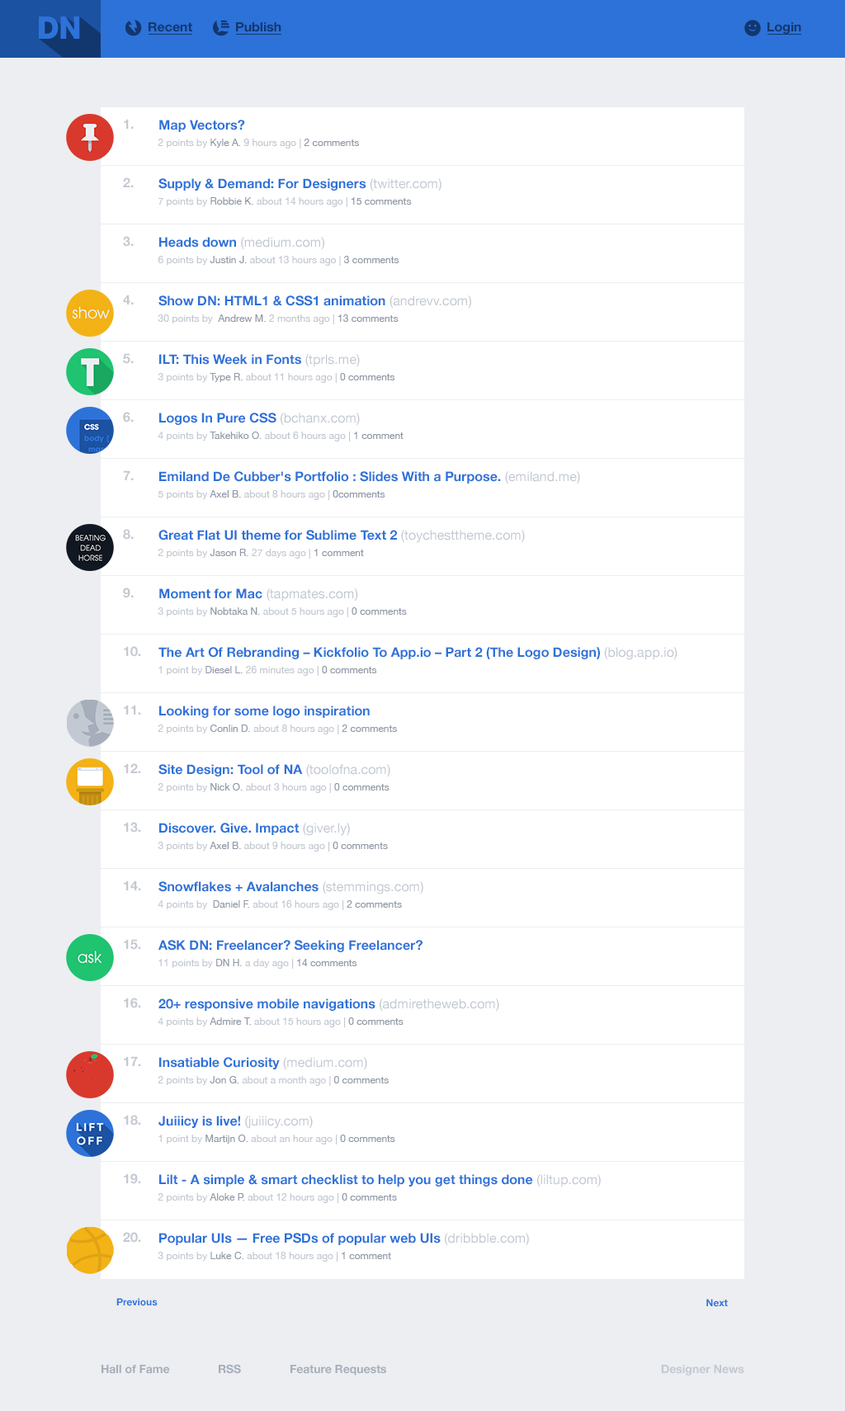
<style>
.page{position:relative;width:845px;height:1411px;background:#ffffff}
.page>*{position:absolute;margin:0}
.t1{font:12.9px "HelveticaNeue-Bold";color:#12376f}
.t2{font:13.2px "HelveticaNeue-Bold";color:#c3c9d2}
.t3{font:13.2px "HelveticaNeue-Bold";color:#2d72d9}
.t4{font:9.9px "HelveticaNeue";color:#c3c9d2}
.t5{font:9.9px "HelveticaNeue";color:#9099a7}
.t6{font:13.2px "HelveticaNeue";color:#c3c9d2}
.t7{font:9.9px "HelveticaNeue-Bold";color:#2d72d9}
.t8{font:11.6px "HelveticaNeue-Bold";color:#a6aebb}
.t9{font:11.6px "HelveticaNeue-Bold";color:#c3c9d2}
</style>
<div class="page">
<p class="t1" style="left:149px;top:22px;width:43px;height:10px">Recent</p>
<p class="t1" style="left:236px;top:22px;width:45px;height:10px">Publish</p>
<p class="t1" style="left:767px;top:22px;width:34px;height:12px">Login</p>
<p class="t2" style="left:124px;top:119px;width:10px;height:10px">1.</p>
<p class="t3" style="left:159px;top:120px;width:86px;height:12px">Map Vectors?</p>
<p class="t4" style="left:158px;top:139px;width:201px;height:10px">2 points by <span class="t5">Kyle A.</span> 9 hours ago | <span class="t5">2 comments</span></p>
<p class="t2" style="left:123px;top:177px;width:11px;height:10px">2.</p>
<p class="t3" style="left:158px;top:178px;width:283px;height:13px">Supply &amp; Demand: For Designers<span class="t6"> (twitter.com)</span></p>
<p class="t4" style="left:158px;top:197px;width:254px;height:10px">7 points by<span class="t5"> Robbie K.</span> about 14 hours ago | <span class="t5">15 comments</span></p>
<p class="t2" style="left:123px;top:236px;width:11px;height:11px">3.</p>
<p class="t6" style="left:159px;top:237px;width:165px;height:13px"><span class="t3">Heads down </span>(medium.com)</p>
<p class="t4" style="left:158px;top:256px;width:241px;height:10px">6 points by<span class="t5"> Justin J. </span>about 13 hours ago | <span class="t5">3 comments</span></p>
<p class="t2" style="left:123px;top:295px;width:11px;height:10px">4.</p>
<p class="t3" style="left:158px;top:295px;width:313px;height:14px">Show DN: HTML1 &amp; CSS1 animation <span class="t6">(andrevv.com)</span></p>
<p class="t4" style="left:158px;top:314px;width:241px;height:10px">30 points by<span class="t5">  Andrew M.</span> 2 months ago | <span class="t5">13 comments</span></p>
<p class="t2" style="left:123px;top:353px;width:11px;height:11px">5.</p>
<p class="t3" style="left:159px;top:354px;width:201px;height:13px">ILT: This Week in Fonts<span class="t6"> (tprls.me)</span></p>
<p class="t4" style="left:158px;top:373px;width:237px;height:10px">3 points by <span class="t5">Type R.</span> about 11 hours ago | <span class="t5">0 comments</span></p>
<p class="t2" style="left:123px;top:412px;width:11px;height:11px">6.</p>
<p class="t3" style="left:159px;top:413px;width:201px;height:13px">Logos In Pure CSS <span class="t6">(bchanx.com)</span></p>
<p class="t4" style="left:158px;top:432px;width:246px;height:9px">4 points by <span class="t5">Takehiko O.</span> about 6 hours ago | <span class="t5">1 comment</span></p>
<p class="t2" style="left:123px;top:470px;width:11px;height:10px">7.</p>
<p class="t3" style="left:159px;top:471px;width:421px;height:13px">Emiland De Cubber's Portfolio : Slides With a Purpose. <span class="t6">(emiland.me)</span></p>
<p class="t4" style="left:158px;top:490px;width:227px;height:10px">5 points by <span class="t5">Axel B.</span> about 8 hours ago | <span class="t5">0comments</span></p>
<p class="t2" style="left:123px;top:529px;width:11px;height:11px">8.</p>
<p class="t3" style="left:158px;top:530px;width:367px;height:13px">Great Flat UI theme for Sublime Text 2<span class="t6"> (toychesttheme.com)</span></p>
<p class="t4" style="left:158px;top:549px;width:206px;height:10px">2 points by<span class="t5"> Jason R.</span> 27 days ago | <span class="t5">1 comment</span></p>
<p class="t2" style="left:123px;top:588px;width:11px;height:10px">9.</p>
<p class="t3" style="left:159px;top:588px;width:199px;height:14px">Moment for Mac <span class="t6">(tapmates.com)</span></p>
<p class="t4" style="left:158px;top:607px;width:249px;height:10px">3 points by<span class="t5"> Nobtaka N.</span> about 5 hours ago | <span class="t5">0 comments</span></p>
<p class="t2" style="left:124px;top:646px;width:17px;height:11px">10.</p>
<p class="t3" style="left:158px;top:647px;width:520px;height:13px">The Art Of Rebranding – Kickfolio To App.io – Part 2 (The Logo Design) <span class="t6">(blog.app.io)</span></p>
<p class="t4" style="left:158px;top:666px;width:219px;height:10px">1 point by<span class="t5"> Diesel L.</span> 26 minutes ago | <span class="t5">0 comments</span></p>
<p class="t2" style="left:124px;top:705px;width:17px;height:10px">11.</p>
<p class="t3" style="left:159px;top:706px;width:211px;height:12px">Looking for some logo inspiration</p>
<p class="t4" style="left:158px;top:725px;width:239px;height:9px">2 points by <span class="t5">Conlin D.</span> about 8 hours ago | <span class="t5">2 comments</span></p>
<p class="t2" style="left:124px;top:763px;width:17px;height:10px">12.</p>
<p class="t3" style="left:158px;top:764px;width:232px;height:13px">Site Design: Tool of NA <span class="t6">(toolofna.com)</span></p>
<p class="t4" style="left:158px;top:783px;width:232px;height:10px">2 points by <span class="t5">Nick O.</span> about 3 hours ago | <span class="t5">0 comments</span></p>
<p class="t2" style="left:124px;top:822px;width:17px;height:11px">13.</p>
<p class="t3" style="left:159px;top:823px;width:191px;height:13px">Discover. Give. Impact <span class="t6">(giver.ly)</span></p>
<p class="t4" style="left:158px;top:842px;width:230px;height:10px">3 points by <span class="t5">Axel B. </span>about 9 hours ago | <span class="t5">0 comments</span></p>
<p class="t2" style="left:124px;top:881px;width:17px;height:9px">14.</p>
<p class="t3" style="left:158px;top:881px;width:265px;height:14px">Snowflakes + Avalanches <span class="t6">(stemmings.com)</span></p>
<p class="t4" style="left:158px;top:900px;width:244px;height:10px">4 points by <span class="t5"> Daniel F.</span> about 16 hours ago | <span class="t5">2 comments</span></p>
<p class="t2" style="left:124px;top:939px;width:17px;height:11px">15.</p>
<p class="t3" style="left:158px;top:940px;width:265px;height:12px">ASK DN: Freelancer? Seeking Freelancer?</p>
<p class="t4" style="left:158px;top:959px;width:199px;height:10px">11 points by <span class="t5">DN H.</span> a day ago | <span class="t5">14 comments</span></p>
<p class="t2" style="left:124px;top:998px;width:17px;height:10px">16.</p>
<p class="t3" style="left:158px;top:999px;width:341px;height:13px">20+ responsive mobile navigations<span class="t6"> (admiretheweb.com)</span></p>
<p class="t4" style="left:158px;top:1017px;width:246px;height:10px">4 points by<span class="t5"> Admire T.</span> about 15 hours ago | <span class="t5">0 comments</span></p>
<p class="t2" style="left:124px;top:1056px;width:17px;height:10px">17.</p>
<p class="t3" style="left:159px;top:1057px;width:208px;height:13px">Insatiable Curiosity<span class="t6"> (medium.com)</span></p>
<p class="t4" style="left:158px;top:1076px;width:231px;height:10px">2 points by<span class="t5"> Jon G.</span> about a month ago | <span class="t5">0 comments</span></p>
<p class="t2" style="left:124px;top:1115px;width:17px;height:11px">18.</p>
<p class="t3" style="left:158px;top:1116px;width:155px;height:13px">Juiiicy is live! <span class="t6">(juiiicy.com)</span></p>
<p class="t4" style="left:158px;top:1135px;width:237px;height:10px">1 point by<span class="t5"> Martijn O. </span>about an hour ago | <span class="t5">0 comments</span></p>
<p class="t2" style="left:124px;top:1173px;width:17px;height:11px">19.</p>
<p class="t3" style="left:159px;top:1174px;width:442px;height:13px">Lilt - A simple &amp; smart checklist to help you get things done<span class="t6"> (liltup.com)</span></p>
<p class="t4" style="left:158px;top:1193px;width:239px;height:10px">2 points by <span class="t5">Aloke P. </span>about 12 hours ago | <span class="t5">0 comments</span></p>
<p class="t2" style="left:123px;top:1232px;width:18px;height:11px">20.</p>
<p class="t3" style="left:159px;top:1233px;width:370px;height:13px">Popular UIs — Free PSDs of popular web UIs<span class="t6"> (dribbble.com)</span></p>
<p class="t4" style="left:158px;top:1252px;width:233px;height:10px">3 points by <span class="t5">Luke C.</span> about 18 hours ago | <span class="t5">1 comment</span></p>
<p class="t7" style="left:116px;top:1298px;width:42px;height:8px">Previous</p>
<p class="t7" style="left:706px;top:1299px;width:22px;height:8px">Next</p>
<p class="t8" style="left:102px;top:1365px;width:68px;height:9px">Hall of Fame</p>
<p class="t8" style="left:219px;top:1364px;width:22px;height:10px">RSS</p>
<p class="t8" style="left:290px;top:1365px;width:96px;height:11px">Feature Requests</p>
<p class="t9" style="left:661px;top:1365px;width:83px;height:11px">Designer News</p>
</div>
